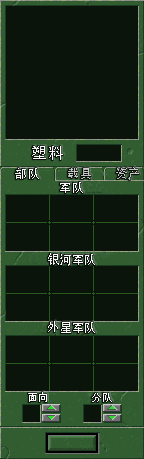
<style>
.page{position:relative;width:144px;height:459px;background:#0a140a}
.page>*{position:absolute;margin:0}
.t1{font:16px "AdobeHeitiStd-Regular";letter-spacing:0.025em;color:#ffffff}
.t2{font:12px "AdobeHeitiStd-Regular";letter-spacing:0.025em;color:#ffffff}
.t3{font:12px "AdobeHeitiStd-Regular";letter-spacing:0.025em;color:#c7c7c7}
.t4{font:10px "AdobeHeitiStd-Regular";letter-spacing:0.025em;color:#ffffff}
</style>
<div class="page">
<p class="t1" style="left:32px;top:146px;width:31px;height:14px">塑料</p>
<p class="t2" style="left:15px;top:168px;width:24px;height:11px">部队</p>
<p class="t3" style="left:68px;top:168px;width:23px;height:11px">载具</p>
<p class="t3" style="left:116px;top:167px;width:23px;height:13px">资产</p>
<p class="t2" style="left:60px;top:182px;width:23px;height:11px">军队</p>
<p class="t2" style="left:48px;top:253px;width:47px;height:13px">银河军队</p>
<p class="t2" style="left:48px;top:321px;width:47px;height:12px">外星军队</p>
<p class="t4" style="left:28px;top:392px;width:19px;height:10px">面向</p>
<p class="t4" style="left:92px;top:393px;width:20px;height:9px">分队</p>
</div>
